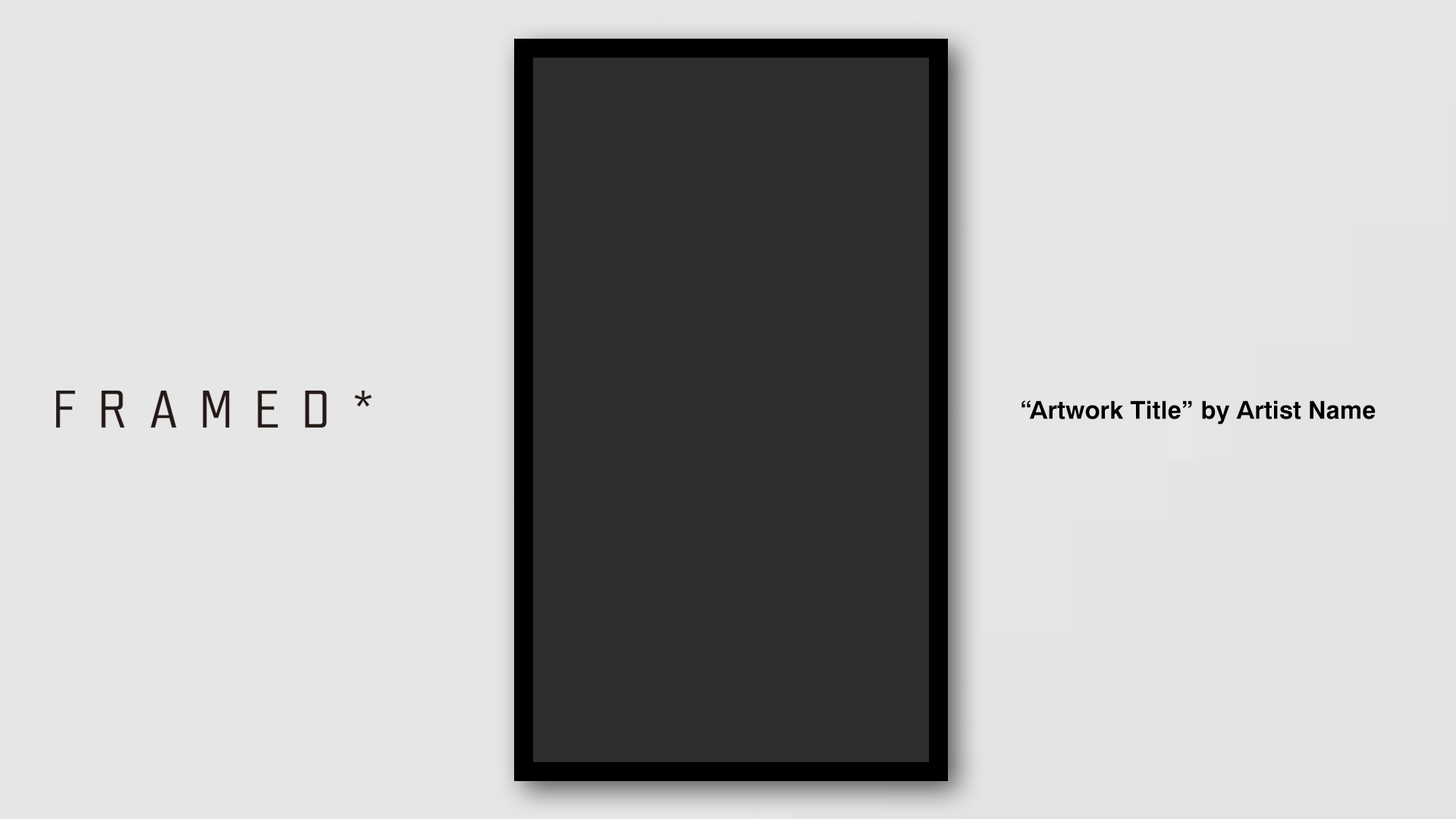
<style>
.page{position:relative;width:1456px;height:819px;background:#e6e6e6}
.page>*{position:absolute;margin:0}
.t1{font:24.9px "Helvetica-Bold";color:#000000}
</style>
<div class="page">
<p class="t1" style="left:1021px;top:400px;width:355px;height:25px">“Artwork Title” by Artist Name</p>
</div>
